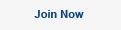
<style>
.page{position:relative;width:121px;height:30px;background:#f5f5f5}
.page>*{position:absolute;margin:0}
.t1{font:11px "Arial-BoldMT";color:#064787}
</style>
<div class="page">
<p class="t1" style="left:34px;top:10px;width:50px;height:8px">Join Now</p>
</div>
